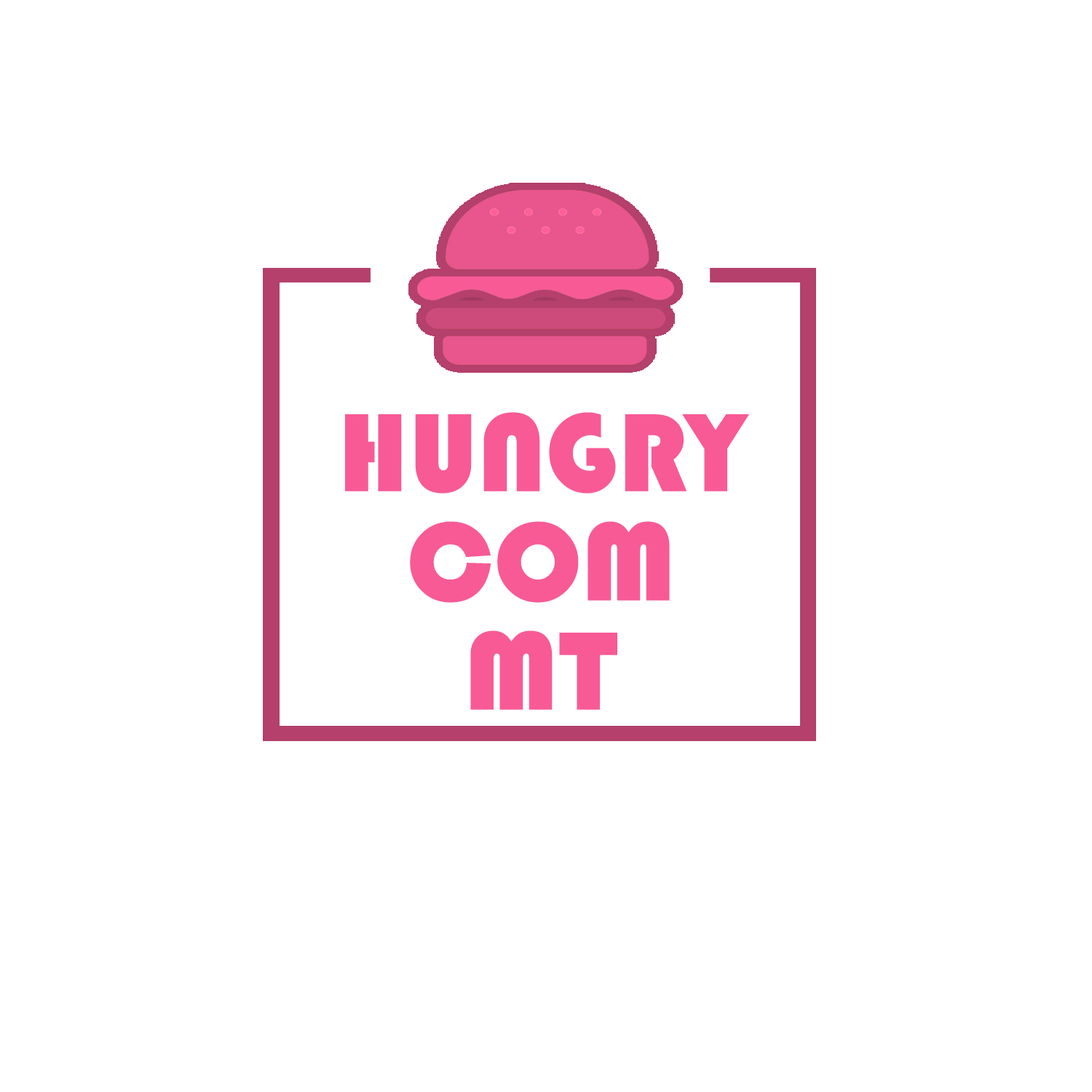
<style>
.page{position:relative;width:1092px;height:1092px;background:#ffffff}
.page>*{position:absolute;margin:0}
.t1{font:115.3px/109.2px "Bauhaus93";letter-spacing:0.005em;color:#f85a96}
</style>
<div class="page">
<p class="t1" style="left:345px;top:412px;width:404px;height:298px;text-align:center">HUNGRY<br>COM<br>MT</p>
</div>
